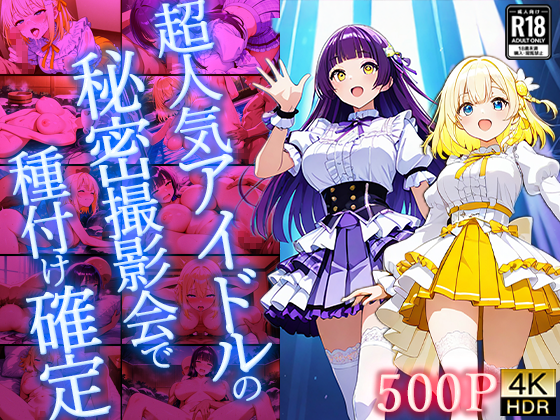
<style>
.page{position:relative;width:560px;height:420px}
.page>*{position:absolute;margin:0}
.t1{font:72.9px "YuMinPr6N-Regular";font-weight:bold}
.t2{font:58.3px "YuMinPr6N-Regular";font-weight:bold}
.t3{font:36.5px "YuMinPr6N-Regular";font-weight:bold}
.t4{font:52px "YuMinPr6N-Regular";font-weight:bold}
</style>
<div class="page">
<p class="t1" style="left:154px;top:0px;width:118px;height:401px;rotate:-10deg"><span class="t2">超人気</span>アイドル<span class="t3">の</span></p>
<p class="t2" style="left:71px;top:50px;width:107px;height:318px;rotate:-10deg"><span class="t1">秘密</span>撮影会<span class="t3">で</span></p>
<p class="t4" style="left:377px;top:373px;width:120px;height:39px">500P</p>
</div>
